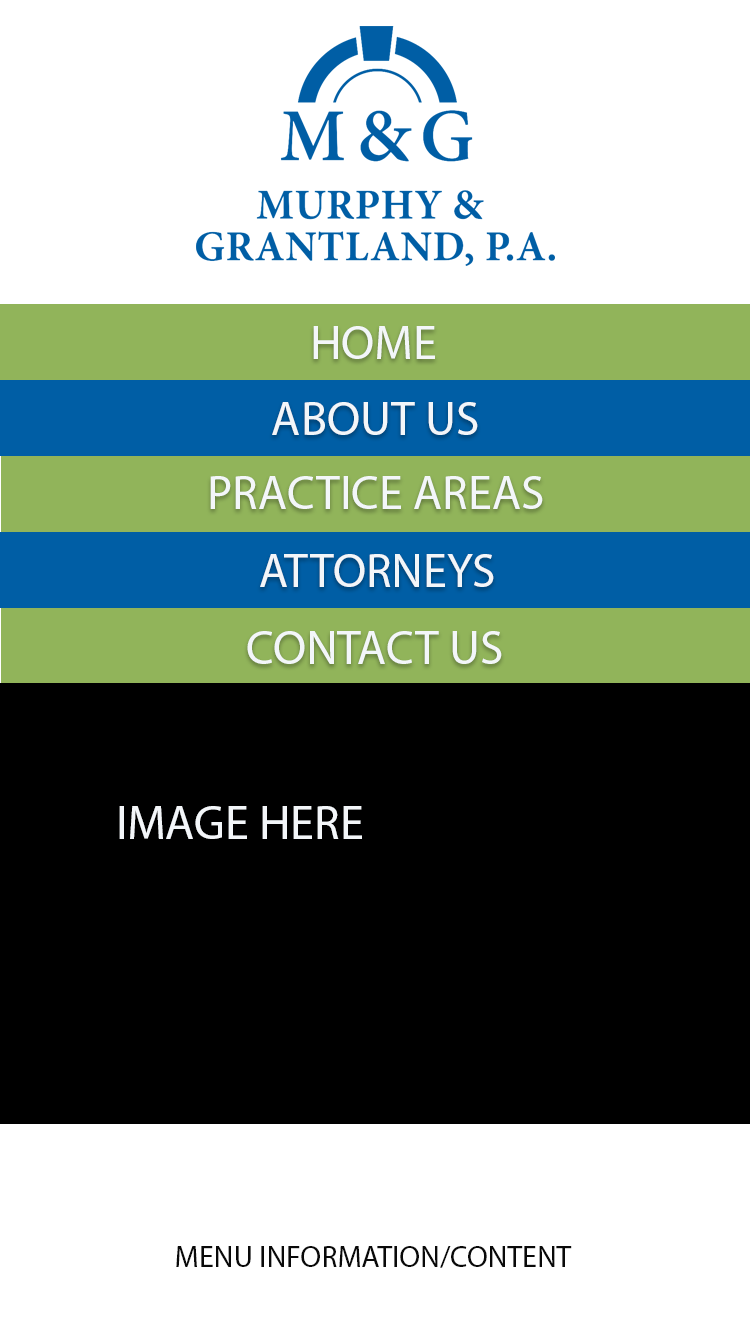
<style>
.page{position:relative;width:750px;height:1334px;background:#ffffff}
.page>*{position:absolute;margin:0}
.t1{font:48px "MyriadPro-Regular";color:#f3f6f9;text-transform:uppercase}
.t2{font:30px "MyriadPro-Regular";color:#090909;text-transform:uppercase}
</style>
<div class="page">
<p class="t1" style="left:313px;top:326px;width:122px;height:33px">home</p>
<p class="t1" style="left:272px;top:402px;width:206px;height:33px">About Us</p>
<p class="t1" style="left:210px;top:476px;width:333px;height:33px">Practice areas</p>
<p class="t1" style="left:260px;top:554px;width:234px;height:33px">Attorneys</p>
<p class="t1" style="left:247px;top:631px;width:255px;height:33px">Contact Us</p>
<p class="t1" style="left:119px;top:806px;width:243px;height:33px">Image Here</p>
<p class="t2" style="left:176px;top:1246px;width:396px;height:22px">Menu information/content</p>
</div>
